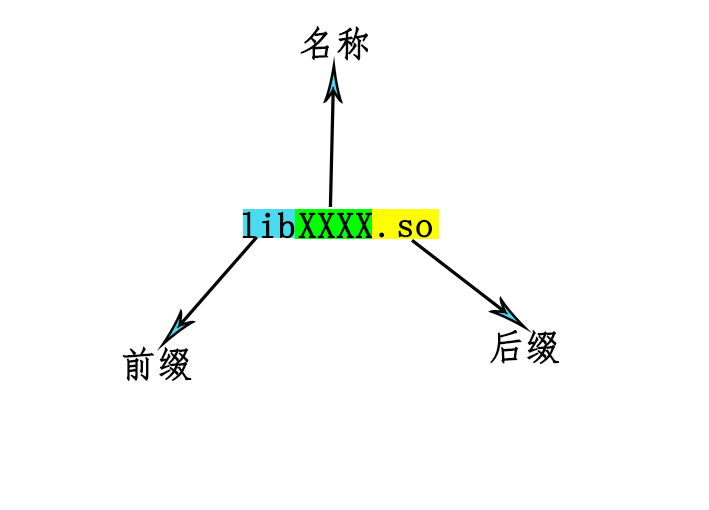
<style>
.page{position:relative;width:709px;height:510px;background:#ffffff}
.page>*{position:absolute;margin:0}
.t1{font:36px "FangSong";color:#040404;font-weight:bold}
</style>
<div class="page">
<p class="t1" style="left:300px;top:26px;width:68px;height:35px">名称</p>
<p class="t1" style="left:242px;top:211px;width:53px;height:28px">lib</p>
<p class="t1" style="left:298px;top:212px;width:75px;height:26px">XXXX</p>
<p class="t1" style="left:379px;top:219px;width:53px;height:19px">.so</p>
<p class="t1" style="left:490px;top:330px;width:69px;height:34px">后缀</p>
<p class="t1" style="left:122px;top:346px;width:70px;height:35px">前缀</p>
</div>
